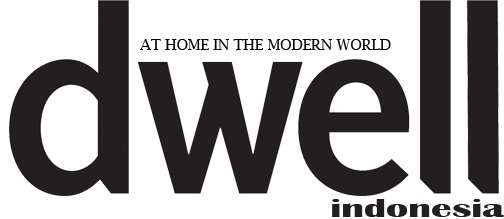
<style>
.page{position:relative;width:504px;height:219px;background:#ffffff}
.page>*{position:absolute;margin:0}
.t1{font:14.7px "LucidaBright";color:#030101}
.t2{font:27px "BritannicBold";color:#231f20;scale:1.51 1}
</style>
<div class="page">
<p class="t1" style="left:139px;top:39px;width:252px;height:11px">AT HOME IN THE MODERN WORLD</p>
<p class="t2" style="left:332px;top:198px;width:173px;height:19px">indonesia</p>
</div>
